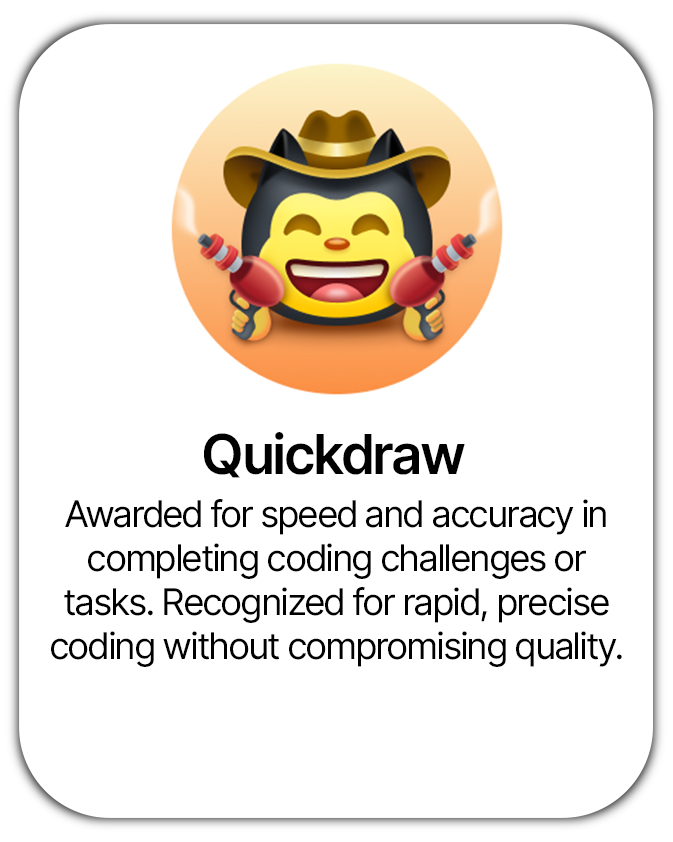
<style>
.page{position:relative;width:673px;height:842px;background:#ffffff}
.page>*{position:absolute;margin:0}
.t1{font:55px "InterTight-SemiBold";letter-spacing:-0.01em;color:#000000}
.t2{font:36.8px "InterTight-Regular";letter-spacing:-0.01em;color:#000000}
</style>
<div class="page">
<p class="t1" style="left:204px;top:432px;width:261px;height:46px">Quickdraw</p>
<p class="t2" style="left:51px;top:499px;width:571px;height:168px;text-align:center">Awarded for speed and accuracy in completing coding challenges or tasks. Recognized for rapid, precise coding without compromising quality.</p>
</div>
